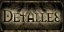
<style>
.page{position:relative;width:64px;height:32px}
.page>*{position:absolute;margin:0}
.t1{font:15.5px "Morpheus"}
</style>
<div class="page">
<p class="t1" style="left:2px;top:10px;width:59px;height:12px">Detalles</p>
</div>
